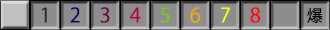
<style>
.page{position:relative;width:330px;height:30px;background:#8d8d8d}
.page>*{position:absolute;margin:0}
.t1{font:20px "KozGoPr6N-Regular";color:#2a2a2a}
.t2{font:20px "KozGoPr6N-Regular";color:#020060}
.t3{font:20px "KozGoPr6N-Regular";color:#6d0040}
.t4{font:20px "KozGoPr6N-Regular";color:#b10043}
.t5{font:20px "KozGoPr6N-Regular";color:#77cb00}
.t6{font:20px "KozGoPr6N-Regular";color:#ecac00}
.t7{font:20px "KozGoPr6N-Regular";color:#fcff00}
.t8{font:20px "KozGoPr6N-Regular";color:#ff0000}
.t9{font:16px "KozGoPr6N-Regular";color:#000000}
</style>
<div class="page">
<p class="t1" style="left:42px;top:7px;width:5px;height:16px">1</p>
<p class="t2" style="left:70px;top:7px;width:10px;height:16px">2</p>
<p class="t3" style="left:100px;top:7px;width:10px;height:16px">3</p>
<p class="t4" style="left:130px;top:7px;width:11px;height:16px">4</p>
<p class="t5" style="left:160px;top:7px;width:10px;height:16px">5</p>
<p class="t6" style="left:190px;top:7px;width:11px;height:16px">6</p>
<p class="t7" style="left:221px;top:7px;width:9px;height:16px">7</p>
<p class="t8" style="left:250px;top:7px;width:10px;height:16px">8</p>
<p class="t9" style="left:307px;top:7px;width:16px;height:16px">爆</p>
</div>
